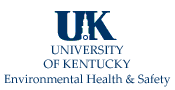
<style>
.page{position:relative;width:175px;height:90px;background:#ffffff}
.page>*{position:absolute;margin:0}
.t1{font:12px "PalatinoLinotype-Roman";color:#003366}
</style>
<div class="page">
<p class="t1" style="left:43px;top:45px;width:88px;height:24px;text-align:center">UNIVERSITY<br>OF KENTUCKY</p>
<p class="t1" style="left:4px;top:74px;width:167px;height:13px">Environmental Health &amp; Safety</p>
</div>
